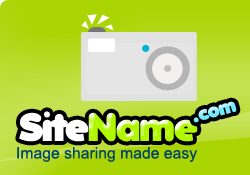
<style>
.page{position:relative;width:250px;height:175px}
.page>*{position:absolute;margin:0}
.t1{font:19.1px "Folks-Heavy";color:#75e9fe}
.t2{font:38.5px "Folks-Heavy";color:#ffffff}
.t3{font:38.5px "Folks-Heavy";color:#aff800}
.t4{font:15.7px "ArialMT";color:#014466}
</style>
<div class="page">
<p class="t1" style="left:193px;top:101px;width:44px;height:22px;rotate:-15deg">.com</p>
<p class="t2" style="left:19px;top:111px;width:179px;height:31px">Site<span class="t3">Name</span></p>
<p class="t4" style="left:17px;top:147px;width:180px;height:15px">Image sharing made easy</p>
</div>
